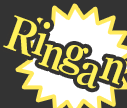
<style>
.page{position:relative;width:127px;height:108px;background:#333333}
.page>*{position:absolute;margin:0}
.t1{font:46px "RyuminPro-ExBold";letter-spacing:-0.08em;color:#fff15b;scale:0.9 1}
</style>
<div class="page">
<p class="t1" style="left:3px;top:15px;width:120px;height:74px;rotate:20deg">Ringan</p>
</div>
